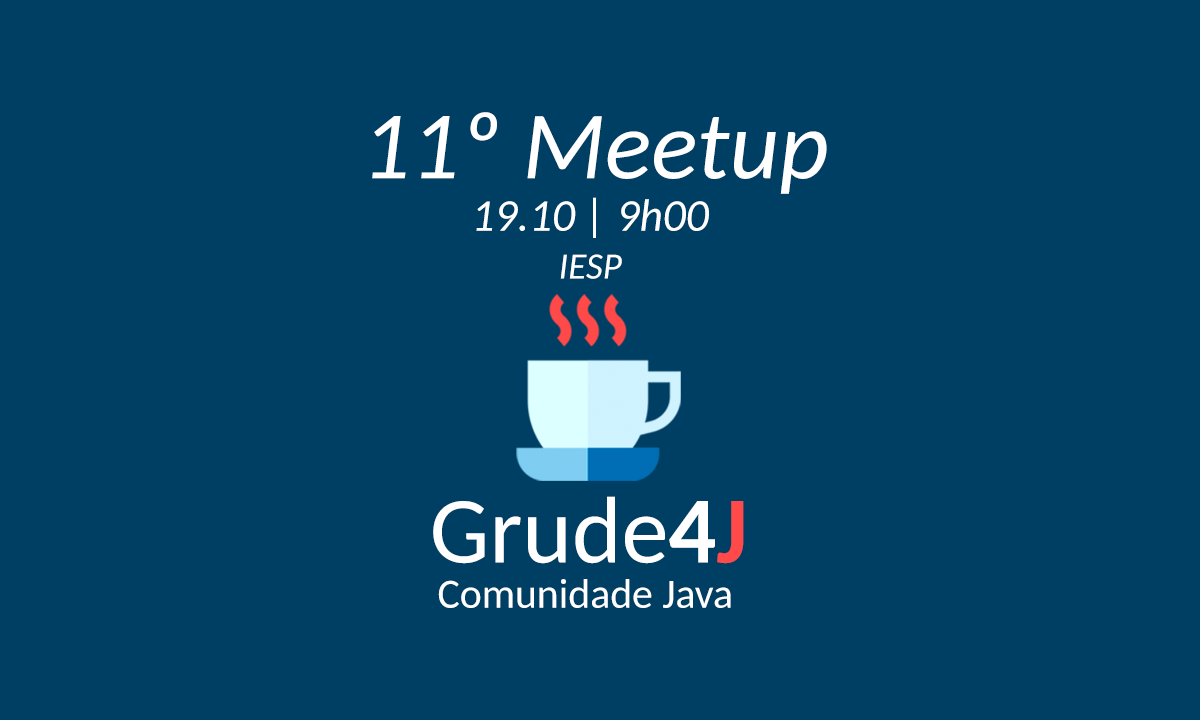
<style>
.page{position:relative;width:1200px;height:720px;background:#003f64}
.page>*{position:absolute;margin:0}
.t1{font:96.8px "Carlito-Italic";color:#ffffff}
.t2{font:45.4px "Carlito-Italic";color:#ffffff}
.t3{font:37.1px "Carlito-Italic";color:#ffffff}
.t4{font:94.7px "Carlito";color:#ffffff}
.t5{font:94.7px "Carlito-Bold";color:#ffffff}
.t6{font:94.7px "Carlito-Bold";color:#ff4a49}
.t7{font:41.7px "Carlito";color:#ffffff}
</style>
<div class="page">
<p class="t1" style="left:372px;top:112px;width:455px;height:82px">11º Meetup</p>
<p class="t2" style="left:476px;top:197px;width:233px;height:41px">19.10 | 9h00</p>
<p class="t3" style="left:560px;top:254px;width:62px;height:25px">IESP</p>
<p class="t4" style="left:433px;top:496px;width:311px;height:68px">Grude<span class="t5">4</span><span class="t6">J</span></p>
<p class="t7" style="left:438px;top:579px;width:293px;height:29px">Comunidade Java</p>
</div>
